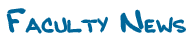
<style>
.page{position:relative;width:189px;height:45px;background:#ffffff}
.page>*{position:absolute;margin:0}
.t1{font:18px "BobbiesHand";color:#006699}
.t2{font:30px "BobbiesHand";color:#006699}
</style>
<div class="page">
<p class="t1" style="left:7px;top:9px;width:178px;height:24px"><span class="t2">F</span>ACULTY <span class="t2">N</span>EWS</p>
</div>
